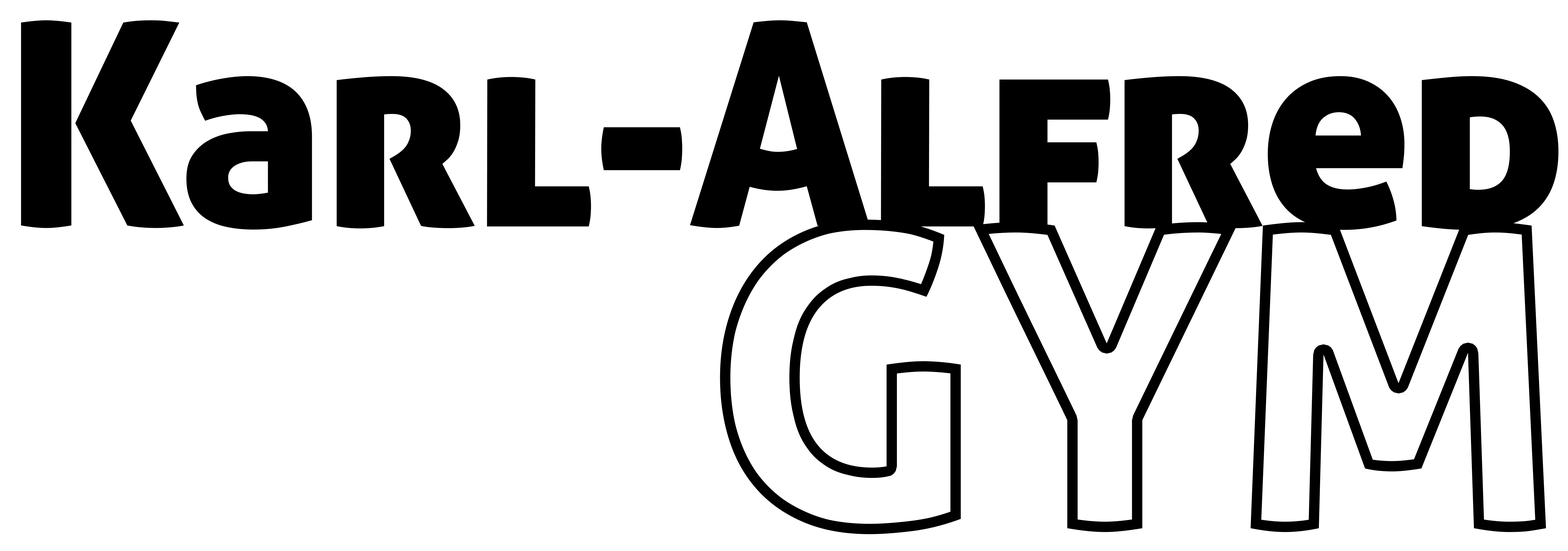
<style>
.page{position:relative;width:1568px;height:551px;background:#ffffff}
.page>*{position:absolute;margin:0}
.t1{font:283.9px "AllerDisplay";letter-spacing:-0.02em;color:#000000}
.t2{font:423.8px "AllerDisplay";letter-spacing:-0.02em}
</style>
<div class="page">
<p class="t1" style="left:21px;top:20px;width:1538px;height:210px">Karl-Alfred</p>
<p class="t2" style="left:720px;top:219px;width:826px;height:315px">GYM</p>
</div>
